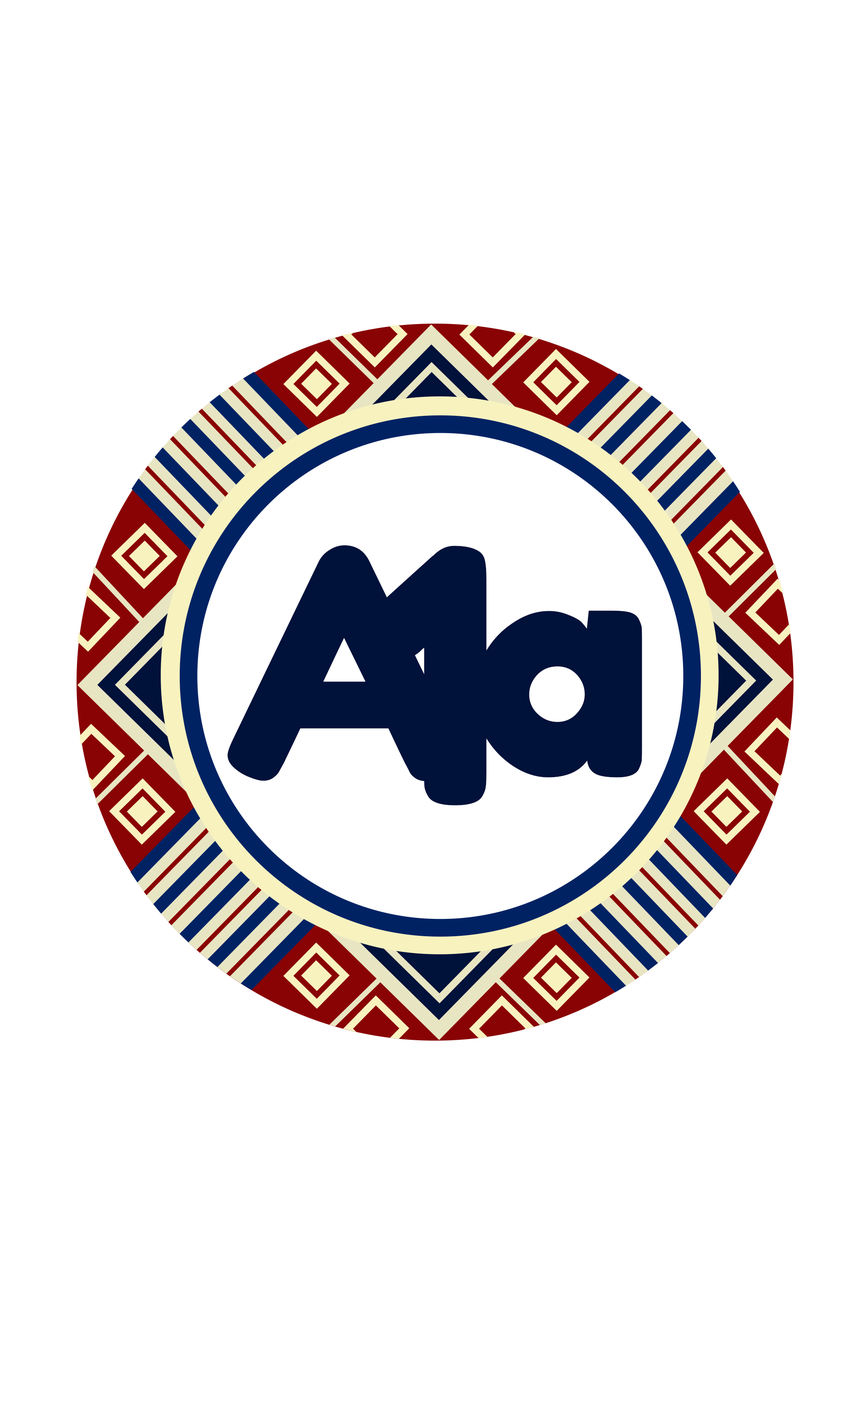
<style>
.page{position:relative;width:846px;height:1410px;background:#ffffff}
.page>*{position:absolute;margin:0}
.t1{font:317.2px "ForkdokaOne-Regular";color:#00113a}
.t2{font:352.5px "ForkdokaOne-Regular";color:#00113a}
</style>
<div class="page">
<p class="t1" style="left:227px;top:545px;width:415px;height:236px">Aa</p>
<p class="t2" style="left:362px;top:546px;width:124px;height:259px">1</p>
</div>
